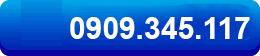
<style>
.page{position:relative;width:260px;height:56px}
.page>*{position:absolute;margin:0}
.t1{font:30px "Arial-BoldMT";color:#ffffff}
</style>
<div class="page">
<p class="t1" style="left:70px;top:17px;width:180px;height:22px">0909.345.117</p>
</div>
